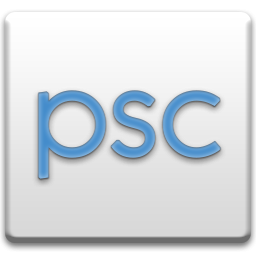
<style>
.page{position:relative;width:256px;height:256px}
.page>*{position:absolute;margin:0}
.t1{font:122px "KabelITCbyBT-Book";color:#5a98cf;font-weight:bold}
</style>
<div class="page">
<p class="t1" style="left:38px;top:90px;width:183px;height:89px">psc</p>
</div>
